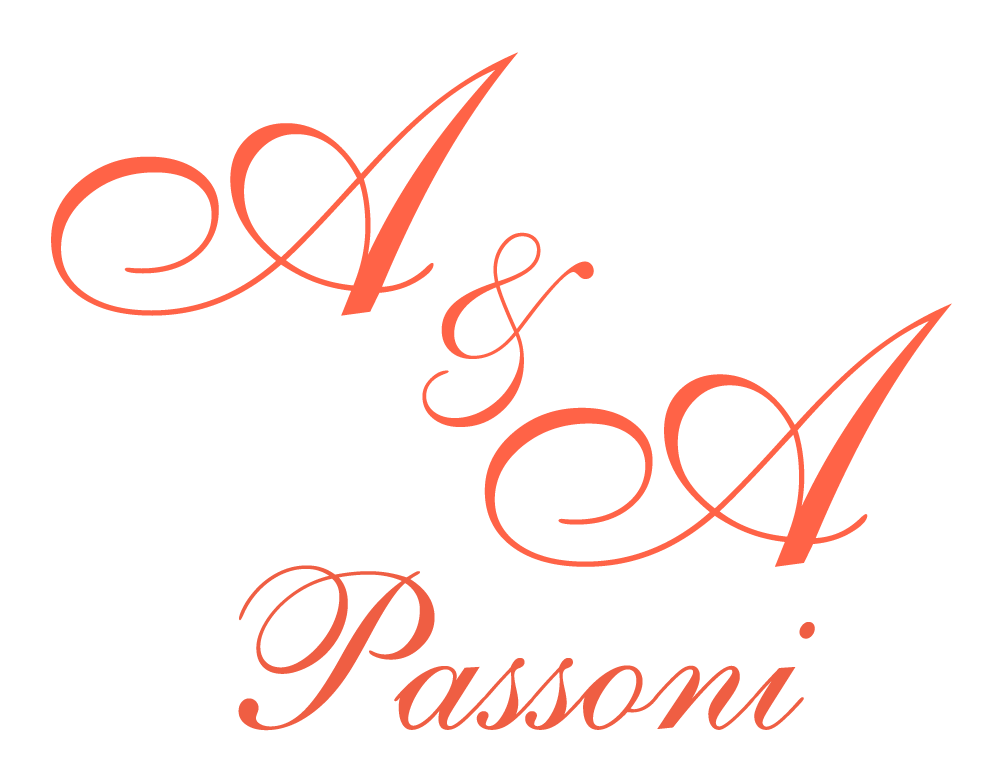
<style>
.page{position:relative;width:1000px;height:778px;background:#ffffff}
.page>*{position:absolute;margin:0}
.t1{font:361.1px "English111VivaceBT-Regular";color:#ff6347}
.t2{font:222.2px "English111VivaceBT-Regular";color:#ff6347}
.t3{font:222.2px "English111VivaceBT-Regular";color:#ef5e43}
</style>
<div class="page">
<p class="t1" style="left:51px;top:52px;width:467px;height:264px">A</p>
<p class="t2" style="left:422px;top:232px;width:172px;height:195px">&amp;</p>
<p class="t1" style="left:484px;top:303px;width:468px;height:264px">A</p>
<p class="t3" style="left:238px;top:565px;width:577px;height:166px">Passoni</p>
</div>
